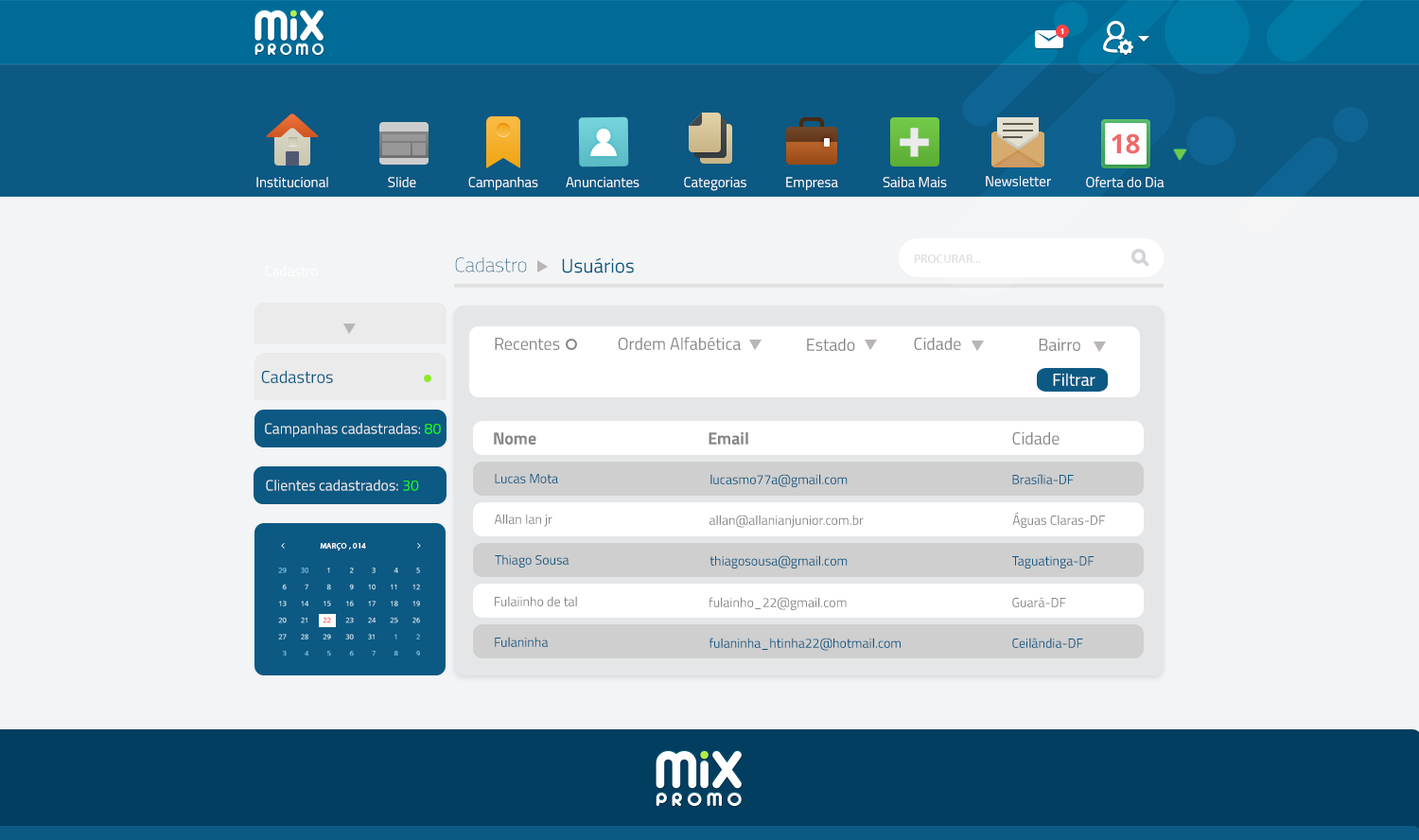
<style>
.page{position:relative;width:1419px;height:840px;background:#f3f4f5}
.page>*{position:absolute;margin:0}
.t1{font:7.6px "OpenSans-Bold";color:#ffffff}
.t2{font:62.7px "TitilliumWeb-Bold";color:#ebebeb}
.t3{font:26.5px "OpenSans-Bold";color:#f0686b;text-transform:uppercase}
.t4{font:14.2px "TitilliumWeb-Regular";color:#ffffff}
.t5{font:19.9px "TitilliumWeb-Thin";color:#0c5983}
.t6{font:19.9px "TitilliumWeb-Regular";color:#0c5983}
.t7{font:12.3px "MyriadPro-Regular";letter-spacing:0.013em;color:#d2d4d8;text-transform:uppercase}
.t8{font:17.2px "TitilliumWeb-Regular";color:#878787}
.t9{font:17.2px "TitilliumWeb-Regular";color:#0c5983}
.t10{font:17.2px "TitilliumWeb-Regular";color:#ffffff}
.t11{font:14.9px "TitilliumWeb-Regular";color:#ebebeb}
.t12{font:14.9px "TitilliumWeb-Regular";color:#1bff03}
.t13{font:17.2px "TitilliumWeb-Bold";color:#878787}
.t14{font:13.2px "TitilliumWeb-Regular";color:#0c5983}
.t15{font:13.2px "TitilliumWeb-Regular";color:#878787}
.t16{font:7.8px "MyriadPro-Regular";letter-spacing:0.051em;color:#ffffff;text-transform:uppercase}
.t17{font:6.6px/16.6px "OpenSans";text-transform:uppercase}
</style>
<div class="page">
<p class="t1" style="left:1061px;top:28px;width:3px;height:7px">1</p>
<p class="t2" style="left:900px;top:128px;width:29px;height:29px">+</p>
<p class="t3" style="left:1112px;top:133px;width:28px;height:21px">18</p>
<p class="t4" style="left:256px;top:177px;width:72px;height:10px">Institucional</p>
<p class="t4" style="left:388px;top:177px;width:28px;height:10px">Slide</p>
<p class="t4" style="left:468px;top:177px;width:70px;height:13px">Campanhas</p>
<p class="t4" style="left:566px;top:177px;width:74px;height:10px">Anunciantes</p>
<p class="t4" style="left:684px;top:177px;width:63px;height:14px">Categorias</p>
<p class="t4" style="left:786px;top:177px;width:52px;height:13px">Empresa</p>
<p class="t4" style="left:883px;top:177px;width:64px;height:10px">Saiba Mais</p>
<p class="t4" style="left:986px;top:176px;width:65px;height:10px">Newsletter</p>
<p class="t4" style="left:1086px;top:176px;width:79px;height:11px">Oferta do Dia</p>
<p class="t5" style="left:455px;top:257px;width:72px;height:15px">Cadastro</p>
<p class="t6" style="left:562px;top:257px;width:72px;height:16px">Usuários</p>
<p class="t7" style="left:915px;top:255px;width:66px;height:8px">PROCURAR...</p>
<p class="t4" style="left:265px;top:266px;width:53px;height:10px">Cadastro</p>
<p class="t8" style="left:495px;top:338px;width:65px;height:12px">Recentes</p>
<p class="t8" style="left:618px;top:337px;width:123px;height:13px">Ordem Alfabética</p>
<p class="t8" style="left:807px;top:338px;width:48px;height:13px">Estado</p>
<p class="t8" style="left:914px;top:337px;width:47px;height:13px">Cidade</p>
<p class="t8" style="left:1039px;top:339px;width:42px;height:12px">Bairro</p>
<p class="t9" style="left:261px;top:370px;width:72px;height:13px">Cadastros</p>
<p class="t10" style="left:1053px;top:373px;width:43px;height:13px">Filtrar</p>
<p class="t11" style="left:265px;top:423px;width:176px;height:14px">Campanhas cadastradas: <span class="t12">80</span></p>
<p class="t13" style="left:494px;top:432px;width:42px;height:13px">Nome</p>
<p class="t13" style="left:709px;top:432px;width:39px;height:13px">Email</p>
<p class="t8" style="left:1012px;top:431px;width:48px;height:14px">Cidade</p>
<p class="t11" style="left:266px;top:480px;width:153px;height:11px">Clientes cadastrados: <span class="t12">30</span></p>
<p class="t14" style="left:495px;top:474px;width:63px;height:9px">Lucas Mota</p>
<p class="t14" style="left:711px;top:474px;width:137px;height:13px">lucasmo77a@gmail.com</p>
<p class="t14" style="left:1012px;top:474px;width:62px;height:10px">Brasília-DF</p>
<p class="t15" style="left:494px;top:514px;width:59px;height:13px">Allan Ian jr</p>
<p class="t15" style="left:710px;top:515px;width:154px;height:13px">allan@allanianjunior.com.br</p>
<p class="t15" style="left:1012px;top:512px;width:93px;height:16px">Águas Claras-DF</p>
<p class="t16" style="left:320px;top:543px;width:46px;height:8px">MARÇO , 014</p>
<p class="t14" style="left:495px;top:554px;width:75px;height:14px">Thiago Sousa</p>
<p class="t14" style="left:710px;top:555px;width:138px;height:14px">thiagosousa@gmail.com</p>
<p class="t14" style="left:1012px;top:556px;width:83px;height:13px">Taguatinga-DF</p>
<p class="t17" style="left:278px;top:568px;width:9px;height:88px;text-align:right">29<br>6<br>13<br>20<br>27<br>3</p>
<p class="t17" style="left:301px;top:568px;width:7px;height:88px;text-align:right">30<br>7<br>14<br>21<br>28<br>4</p>
<p class="t17" style="left:323px;top:568px;width:8px;height:88px;text-align:right">1<br>8<br>15<br>22<br>29<br>5</p>
<p class="t17" style="left:345px;top:568px;width:9px;height:88px;text-align:right">2<br>9<br>16<br>23<br>30<br>6</p>
<p class="t17" style="left:368px;top:568px;width:8px;height:88px;text-align:right">3<br>10<br>17<br>24<br>31<br>7</p>
<p class="t17" style="left:390px;top:568px;width:8px;height:88px;text-align:right">4<br>11<br>18<br>25<br>1<br>8</p>
<p class="t17" style="left:413px;top:568px;width:7px;height:88px;text-align:right">5<br>12<br>19<br>26<br>2<br>9</p>
<p class="t15" style="left:495px;top:596px;width:82px;height:10px">Fulaiinho de tal</p>
<p class="t15" style="left:709px;top:597px;width:138px;height:13px">fulainho_22@gmail.com</p>
<p class="t15" style="left:1012px;top:597px;width:54px;height:10px">Guará-DF</p>
<p class="t14" style="left:495px;top:637px;width:54px;height:10px">Fulaninha</p>
<p class="t14" style="left:710px;top:638px;width:191px;height:13px">fulaninha_htinha22@hotmail.com</p>
<p class="t14" style="left:1012px;top:638px;width:71px;height:10px">Ceilândia-DF</p>
</div>
